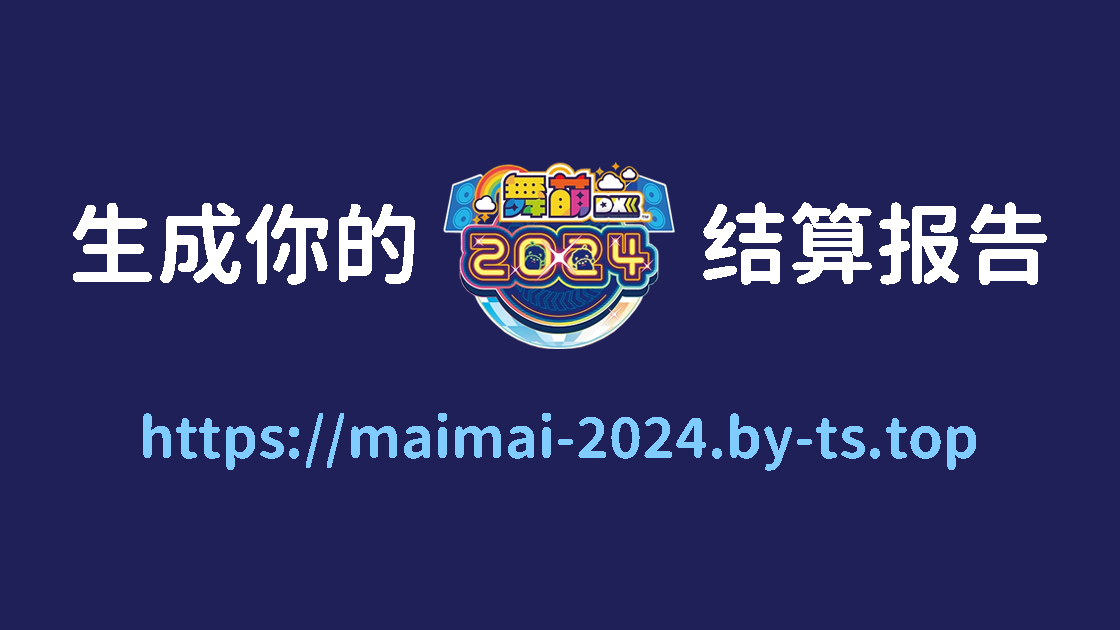
<style>
.page{position:relative;width:1120px;height:630px;background:#202058}
.page>*{position:absolute;margin:0}
.t1{font:88px "Resource-Han-Rounded-CN-Bold";color:#ffffff}
.t2{font:56px "Resource-Han-Rounded-CN-Bold";color:#80ccff}
</style>
<div class="page">
<p class="t1" style="left:73px;top:203px;width:342px;height:82px">生成你的</p>
<p class="t1" style="left:703px;top:202px;width:344px;height:83px">结算报告</p>
<p class="t2" style="left:143px;top:413px;width:833px;height:58px">https://maimai-2024.by-ts.top</p>
</div>
